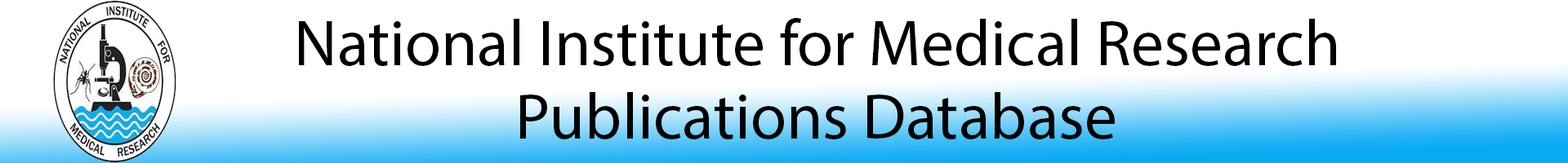
<style>
.page{position:relative;width:1568px;height:163px;background:#ffffff}
.page>*{position:absolute;margin:0}
.t1{font:65.3px "MyriadPro-Regular";color:#000000}
</style>
<div class="page">
<p class="t1" style="left:299px;top:18px;width:1037px;height:48px">National Institute for Medical Research</p>
<p class="t1" style="left:520px;top:92px;width:595px;height:48px">Publications Database</p>
</div>
